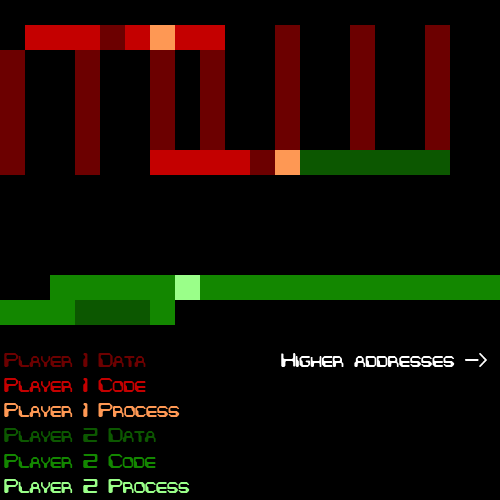
<style>
.page{position:relative;width:500px;height:500px;background:#000000}
.page>*{position:absolute;margin:0}
.t1{font:21px "ChintzyCPUBRK";color:#fe9854}
.t2{font:21px "ChintzyCPUBRK";color:#6c0000}
.t3{font:21px "ChintzyCPUBRK";color:#c40000}
.t4{font:21px "ChintzyCPUBRK";color:#0c5700}
.t5{font:21px "ChintzyCPUBRK";color:#138700}
.t6{font:21px "ChintzyCPUBRK";color:#9aff89}
.t7{font:21px "ChintzyCPUBRK";color:#ffffff}
</style>
<div class="page">
<p class="t1" style="left:4px;top:353px;width:186px;height:140px"><span class="t2">Player 1 Data<br></span><span class="t3">Player 1 Code<br></span>Player 1 Process<br><span class="t4">Player 2 Data<br></span><span class="t5">Player 2 Code<br></span><span class="t6">Player 2 Process</span></p>
<p class="t7" style="left:281px;top:353px;width:206px;height:14px">Higher addresses -&gt;</p>
</div>
